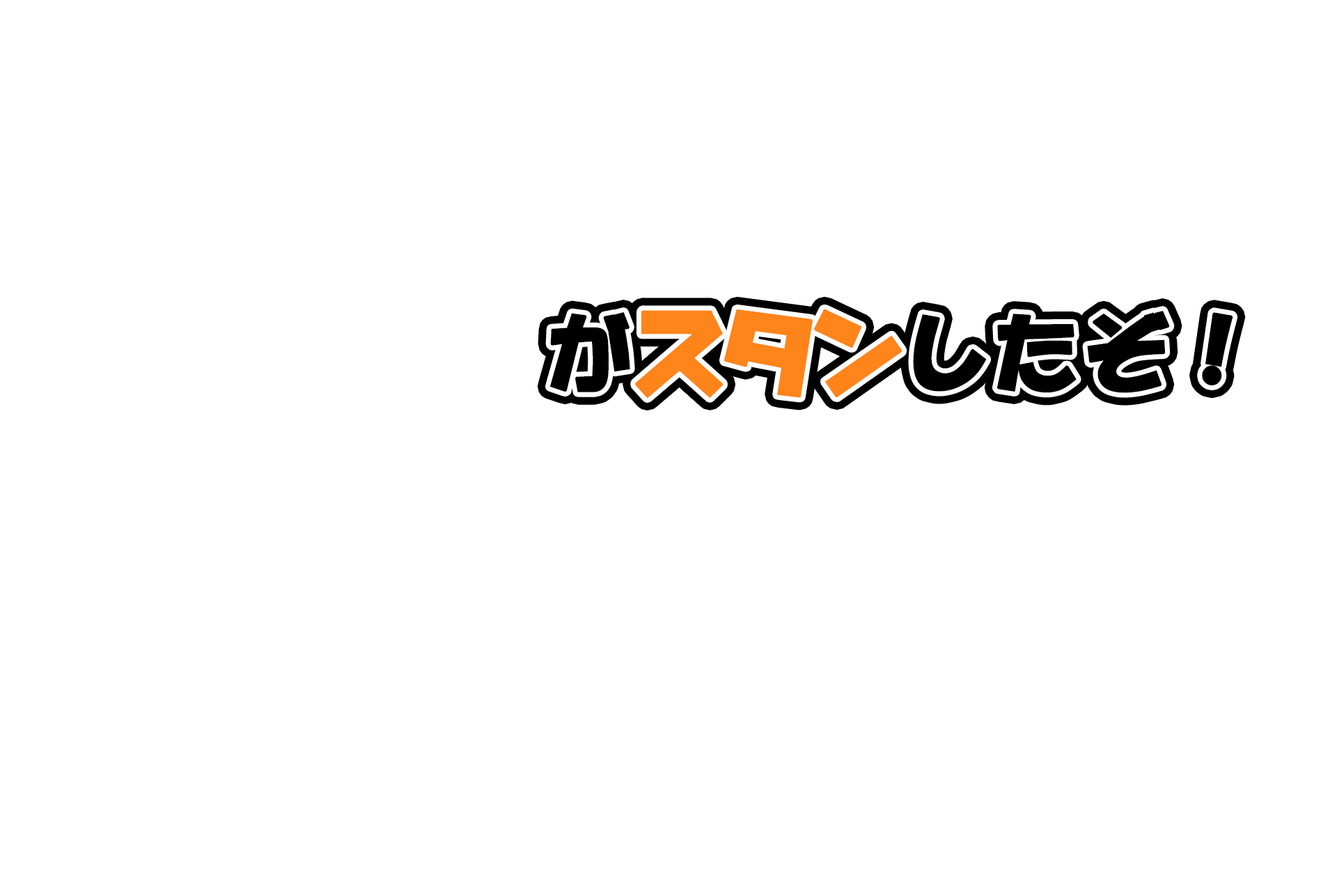
<style>
.page{position:relative;width:1337px;height:892px;background:#ffffff}
.page>*{position:absolute;margin:0}
.t1{font:87.1px "HGSoeiKakupoptai";color:#000000;font-weight:bold}
.t2{font:87.1px "haramase_nyanko";color:#ff8419;font-weight:bold}
</style>
<div class="page">
<p class="t1" style="left:550px;top:309px;width:684px;height:89px">が<span class="t2">スタン</span>したぞ！</p>
</div>
